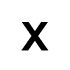
<style>
.page{position:relative;width:70px;height:70px;background:#ffffff}
.page>*{position:absolute;margin:0}
.t1{font:36.7px "NEXONLv1GothicBold";letter-spacing:-0.06em;color:#000000;font-weight:bold}
</style>
<div class="page">
<p class="t1" style="left:21px;top:22px;width:28px;height:29px">X</p>
</div>
